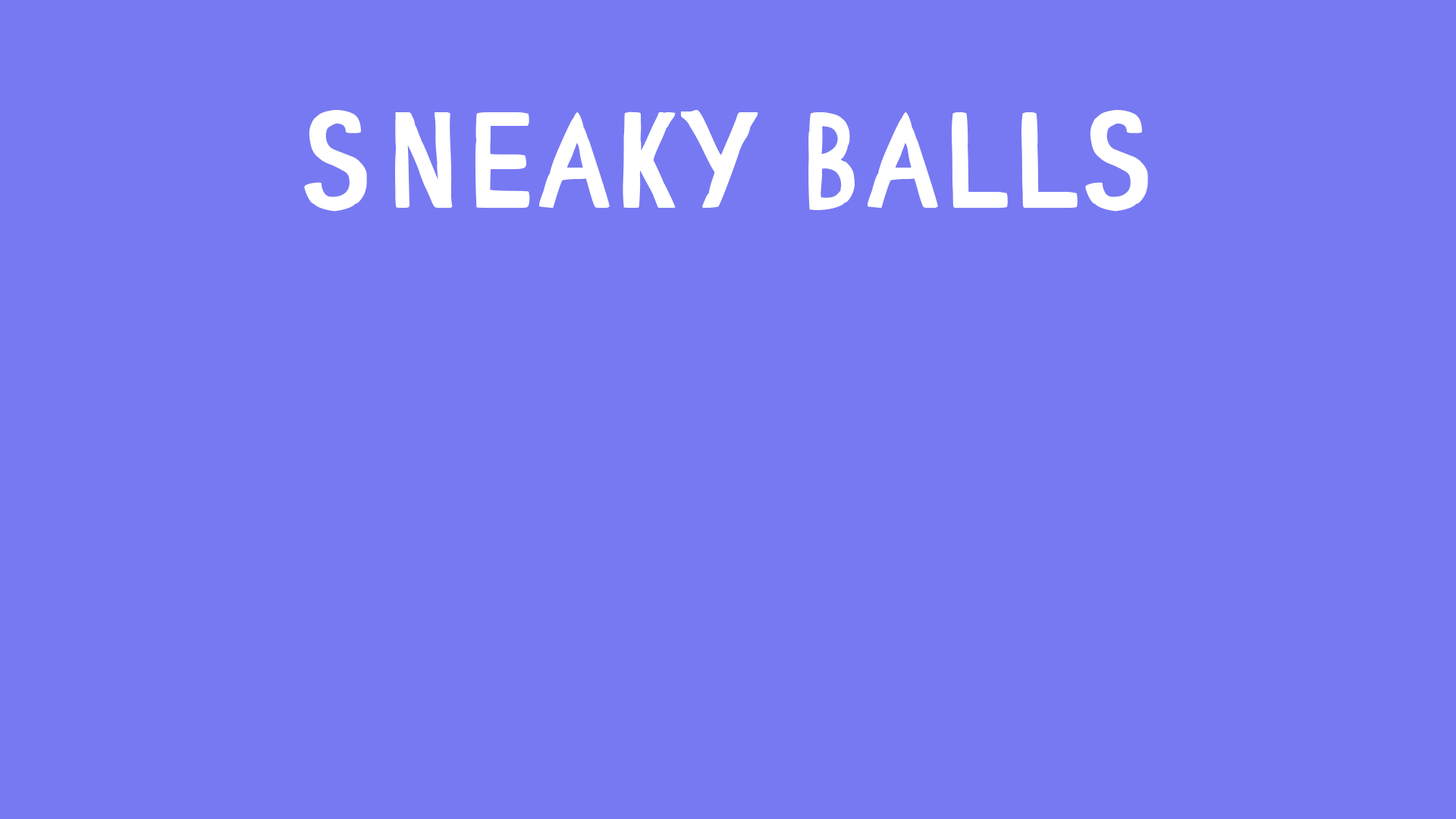
<style>
.page{position:relative;width:1456px;height:819px;background:#7779f2}
.page>*{position:absolute;margin:0}
.t1{font:136.5px "ComicCAT";color:#ffffff}
</style>
<div class="page">
<p class="t1" style="left:304px;top:110px;width:844px;height:102px">Sneaky Balls</p>
</div>
